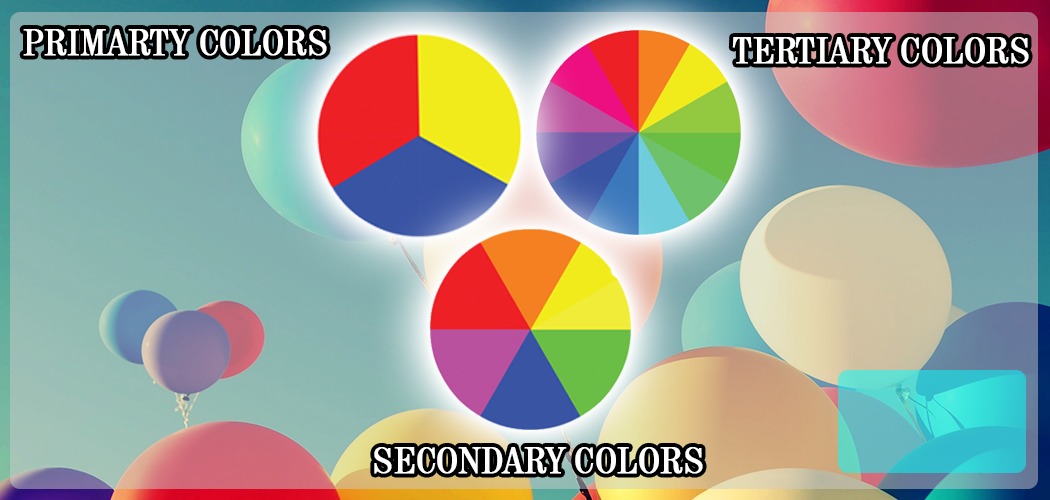
<style>
.page{position:relative;width:1050px;height:500px}
.page>*{position:absolute;margin:0}
.t1{font:8.9px "Century725BT-RomanCondensed";color:#ffffff;font-weight:bold}
</style>
<div class="page">
<p class="t1" style="left:23px;top:29px;width:304px;height:27px">PRIMARTY COLORS</p>
<p class="t1" style="left:732px;top:37px;width:297px;height:27px">TERTIARY COLORS</p>
<p class="t1" style="left:374px;top:447px;width:329px;height:27px">SECONDARY COLORS</p>
</div>
